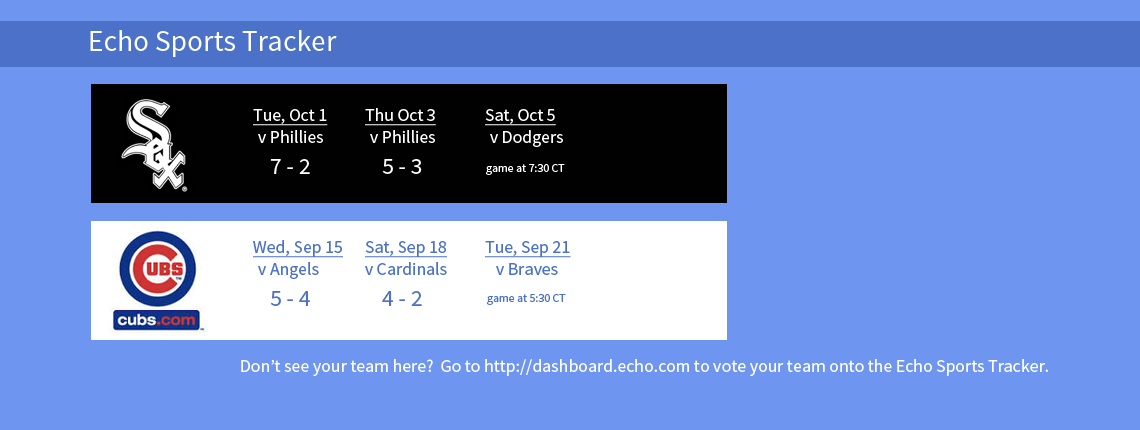
<style>
.page{position:relative;width:1140px;height:430px;background:#6e96f1}
.page>*{position:absolute;margin:0}
.t1{font:29.6px "SourceSansPro-Regular";color:#fefefe}
.t2{font:17.8px "SourceSansPro-Regular";color:#ffffff;text-decoration:underline}
.t3{font:17.8px "SourceSansPro-Regular";color:#ffffff}
.t4{font:23.7px "SourceSansPro-Regular";color:#ffffff}
.t5{font:11.8px "SourceSansPro-Regular";color:#ffffff}
.t6{font:17.8px "SourceSansPro-Regular";color:#4b71c8;text-decoration:underline}
.t7{font:17.8px "SourceSansPro-Regular";color:#4b71c8}
.t8{font:23.7px "SourceSansPro-Regular";color:#4b71c8}
.t9{font:11.8px "SourceSansPro-Regular";color:#4b71c8}
.t10{font:17.8px "SourceSansPro-Regular";color:#fefefe}
</style>
<div class="page">
<p class="t1" style="left:90px;top:30px;width:247px;height:27px">Echo Sports Tracker</p>
<p class="t2" style="left:253px;top:109px;width:75px;height:17px">Tue, Oct 1</p>
<p class="t2" style="left:365px;top:108px;width:71px;height:18px">Thu Oct 3</p>
<p class="t2" style="left:485px;top:109px;width:71px;height:17px">Sat, Oct 5</p>
<p class="t3" style="left:258px;top:130px;width:65px;height:13px">v Phillies</p>
<p class="t3" style="left:370px;top:130px;width:65px;height:13px">v Phillies</p>
<p class="t3" style="left:490px;top:130px;width:73px;height:17px">v Dodgers</p>
<p class="t4" style="left:270px;top:159px;width:40px;height:15px">7 - 2</p>
<p class="t4" style="left:382px;top:159px;width:40px;height:15px">5 - 3</p>
<p class="t5" style="left:486px;top:164px;width:79px;height:11px">game at 7:30 CT</p>
<p class="t6" style="left:253px;top:240px;width:90px;height:18px">Wed, Sep 15</p>
<p class="t6" style="left:365px;top:241px;width:82px;height:17px">Sat, Sep 18</p>
<p class="t6" style="left:485px;top:241px;width:86px;height:17px">Tue, Sep 21</p>
<p class="t7" style="left:258px;top:262px;width:61px;height:17px">v Angels</p>
<p class="t7" style="left:365px;top:262px;width:82px;height:13px">v Cardinals</p>
<p class="t7" style="left:496px;top:263px;width:62px;height:12px">v Braves</p>
<p class="t8" style="left:270px;top:291px;width:40px;height:15px">5 - 4</p>
<p class="t8" style="left:382px;top:291px;width:40px;height:15px">4 - 2</p>
<p class="t9" style="left:487px;top:294px;width:79px;height:11px">game at 5:30 CT</p>
<p class="t10" style="left:241px;top:359px;width:807px;height:17px">Don’t see your team here?  Go to http://dashboard.echo.com to vote your team onto the Echo Sports Tracker.</p>
</div>
